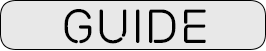
<style>
.page{position:relative;width:266px;height:51px;background:#e8e8e8}
.page>*{position:absolute;margin:0}
.t1{font:48px "UTM-Ericsson-Capital";color:#000000}
</style>
<div class="page">
<p class="t1" style="left:64px;top:9px;width:142px;height:35px">GUIDE</p>
</div>
